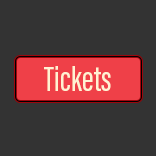
<style>
.page{position:relative;width:156px;height:156px;background:#333333}
.page>*{position:absolute;margin:0}
.t1{font:35.5px "AcuminProExtraCond-Medium";color:#fff2d3}
</style>
<div class="page">
<p class="t1" style="left:44px;top:66px;width:67px;height:25px">Tickets</p>
</div>
